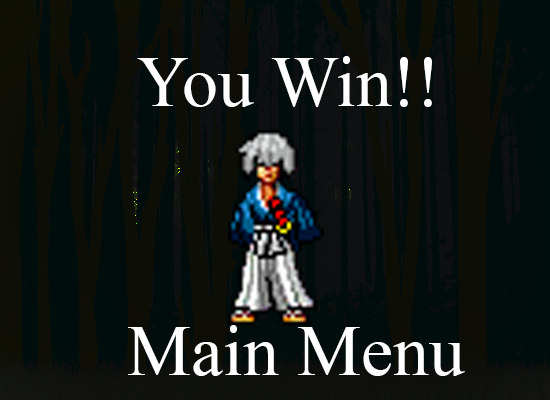
<style>
.page{position:relative;width:550px;height:400px}
.page>*{position:absolute;margin:0}
.t1{font:72px "TimesNewRomanPSMT";color:#ffffff}
</style>
<div class="page">
<p class="t1" style="left:137px;top:56px;width:295px;height:51px">You Win!!</p>
<p class="t1" style="left:128px;top:325px;width:337px;height:51px">Main Menu</p>
</div>
